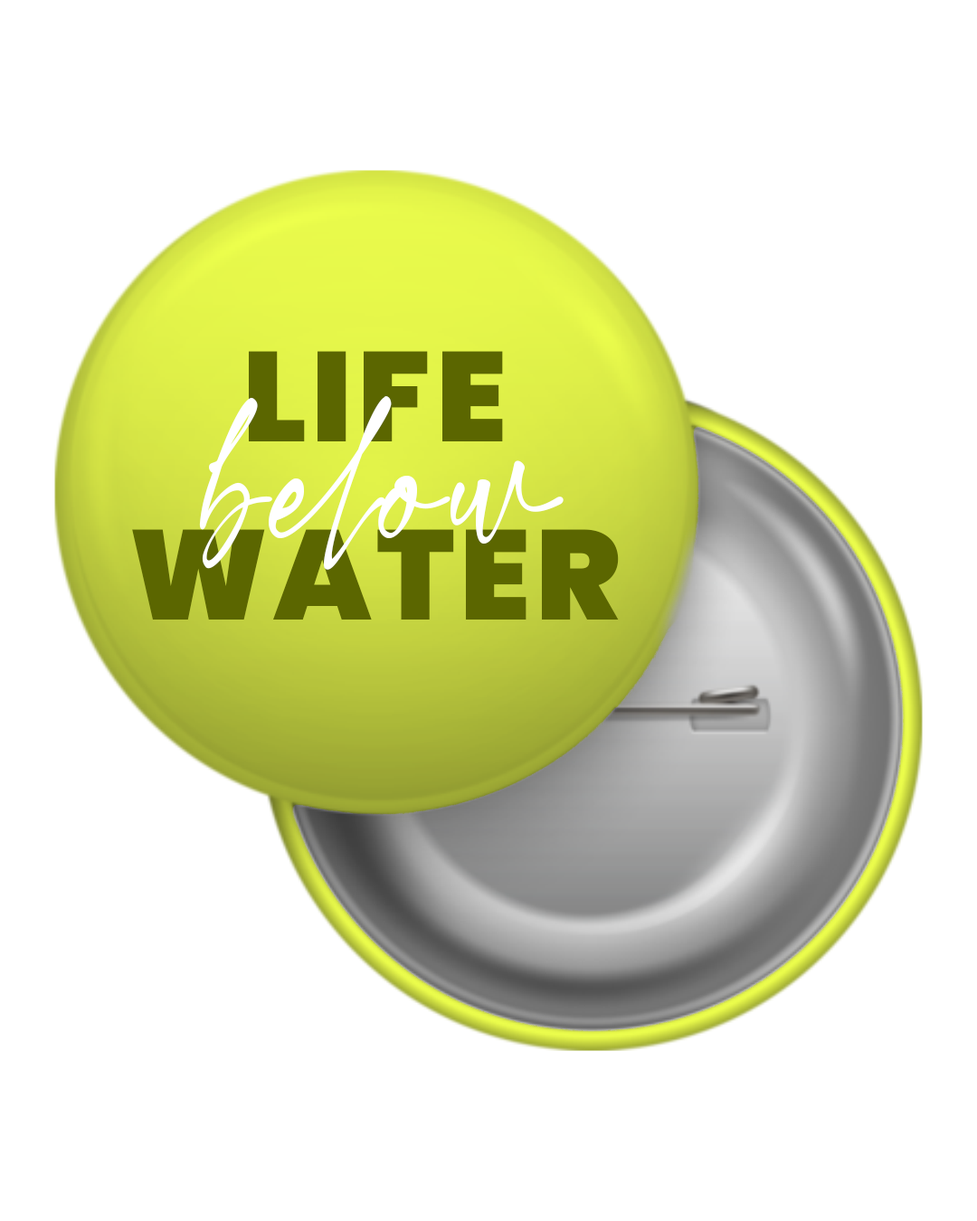
<style>
.page{position:relative;width:977px;height:1221px;background:#ffffff}
.page>*{position:absolute;margin:0}
.t1{font:127px "Poppins-Black";letter-spacing:0.04em;color:#5b6600;text-transform:uppercase}
.t2{font:245.4px "Charlotte-Southern";letter-spacing:0.04em;color:#ffffff}
</style>
<div class="page">
<p class="t1" style="left:249px;top:351px;width:254px;height:90px">life</p>
<p class="t2" style="left:199px;top:396px;width:364px;height:174px">below</p>
<p class="t1" style="left:132px;top:529px;width:487px;height:90px">water</p>
</div>
